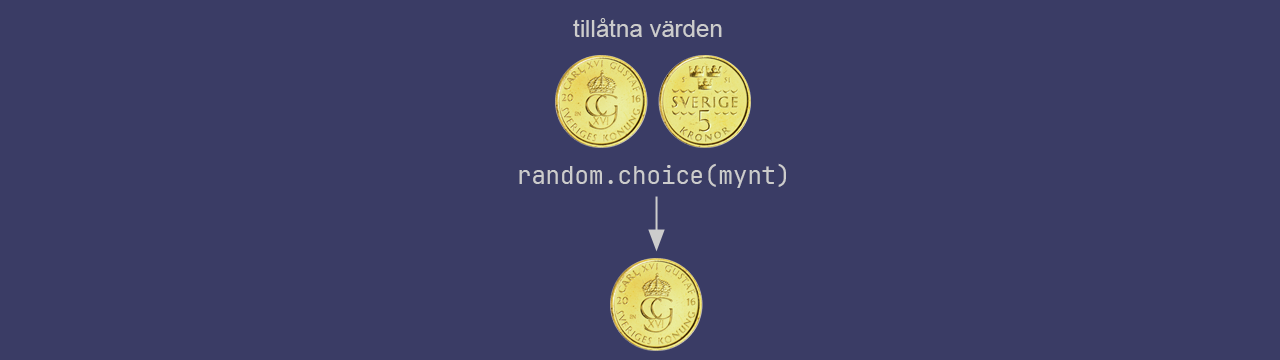
<style>
.page{position:relative;width:1280px;height:360px;background:#3a3c65}
.page>*{position:absolute;margin:0}
.t1{font:24px "ArialMT";color:#cccccc}
.t2{font:24px "JetBrainsMono-Regular";color:#cccccc}
</style>
<div class="page">
<p class="t1" style="left:573px;top:18px;width:149px;height:19px">tillåtna värden</p>
<p class="t2" style="left:519px;top:163px;width:267px;height:25px">random.choice(mynt)</p>
</div>
